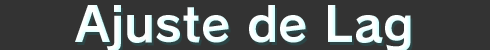
<style>
.page{position:relative;width:490px;height:50px;background:#333333}
.page>*{position:absolute;margin:0}
.t1{font:48px "RodinPro-B";color:#feffff}
</style>
<div class="page">
<p class="t1" style="left:75px;top:5px;width:336px;height:47px">Ajuste de Lag</p>
</div>
